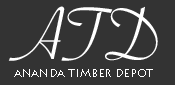
<style>
.page{position:relative;width:175px;height:85px;background:#333333}
.page>*{position:absolute;margin:0}
.t1{font:80px "SavoyeLetPlain";color:#ffffff}
.t2{font:12px "LithosPro-Regular";color:#ffffff}
</style>
<div class="page">
<p class="t1" style="left:8px;top:6px;width:150px;height:55px">ATD</p>
<p class="t2" style="left:14px;top:69px;width:139px;height:8px">ananda timber depot</p>
</div>
